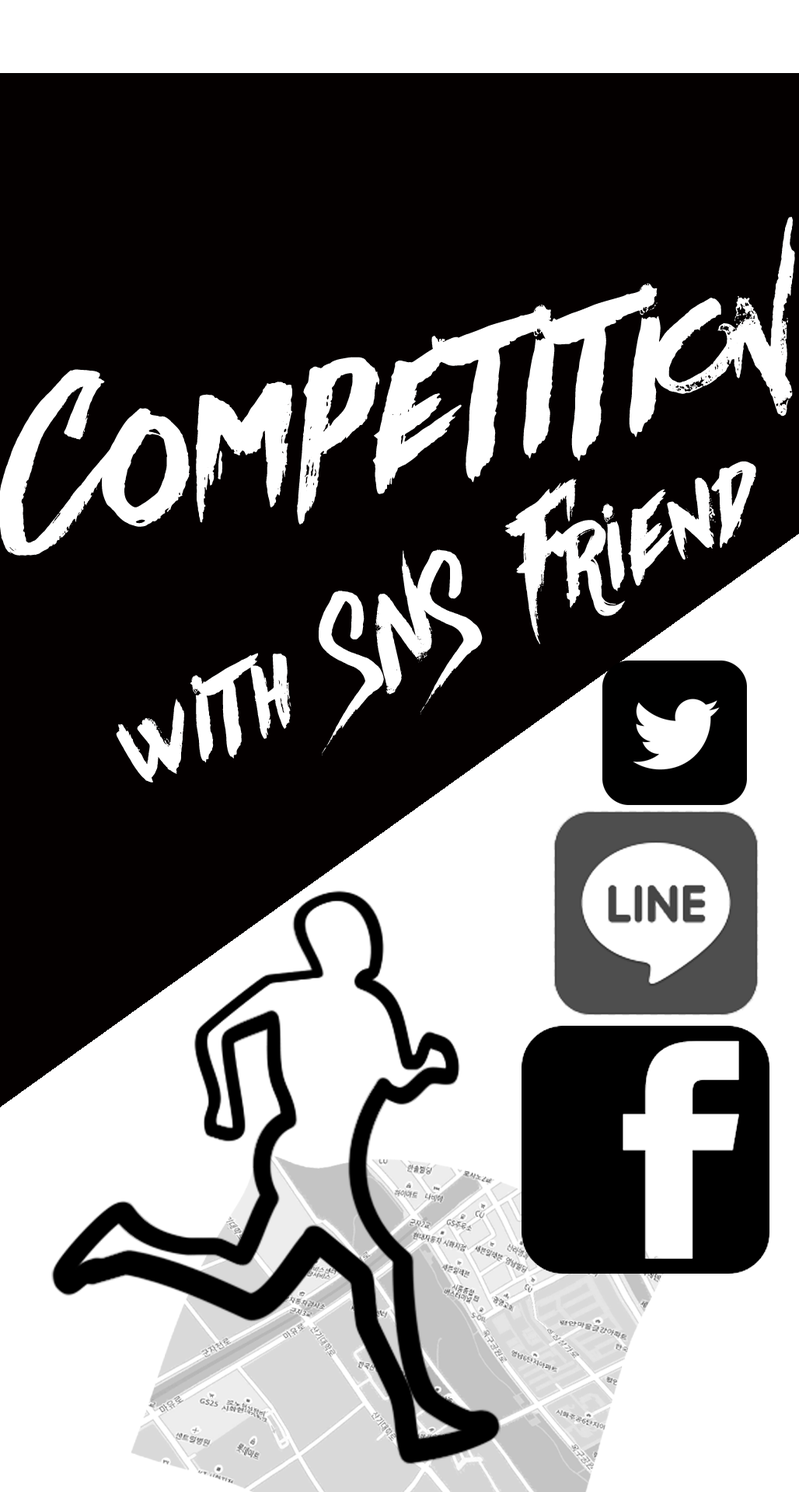
<style>
.page{position:relative;width:799px;height:1492px;background:#040000}
.page>*{position:absolute;margin:0}
.t1{font:236.2px "Againts";color:#ffffff}
.t2{font:134.6px "Againts";color:#ffffff}
</style>
<div class="page">
<p class="t1" style="left:0px;top:217px;width:795px;height:339px;rotate:-11deg">Competition</p>
<p class="t2" style="left:116px;top:461px;width:640px;height:322px;rotate:-23deg">with  SNS  Friend</p>
</div>
